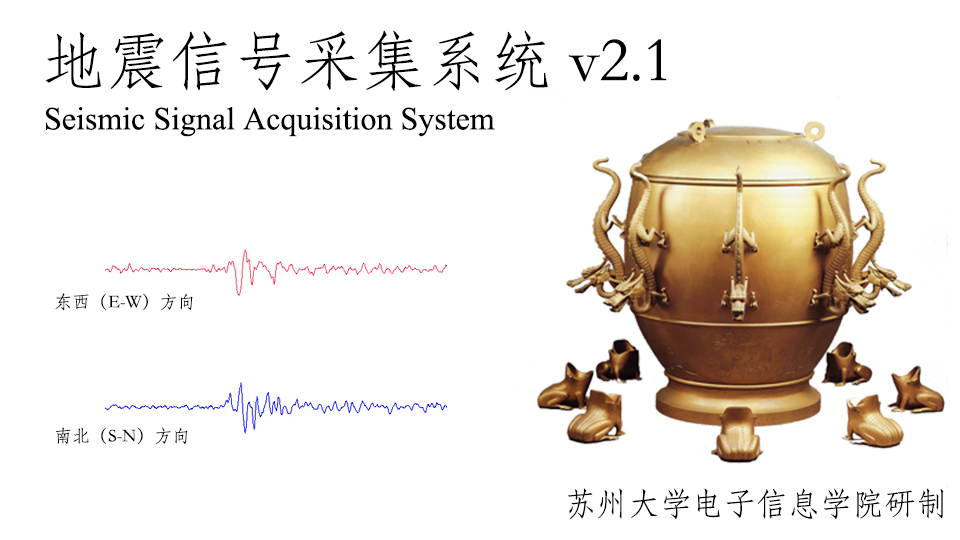
<style>
.page{position:relative;width:960px;height:540px;background:#ffffff}
.page>*{position:absolute;margin:0}
.t1{font:64px "STFangsong";color:#000000}
.t2{font:32px "TimesNewRomanPSMT";color:#000000}
.t3{font:32px "STFangsong";color:#000000}
</style>
<div class="page">
<p class="t1" style="left:45px;top:30px;width:622px;height:62px">地震信号采集系统 v2.1</p>
<p class="t2" style="left:46px;top:107px;width:449px;height:30px">Seismic Signal Acquisition System</p>
<p class="t3" style="left:567px;top:488px;width:377px;height:32px">苏州大学电子信息学院研制</p>
</div>
